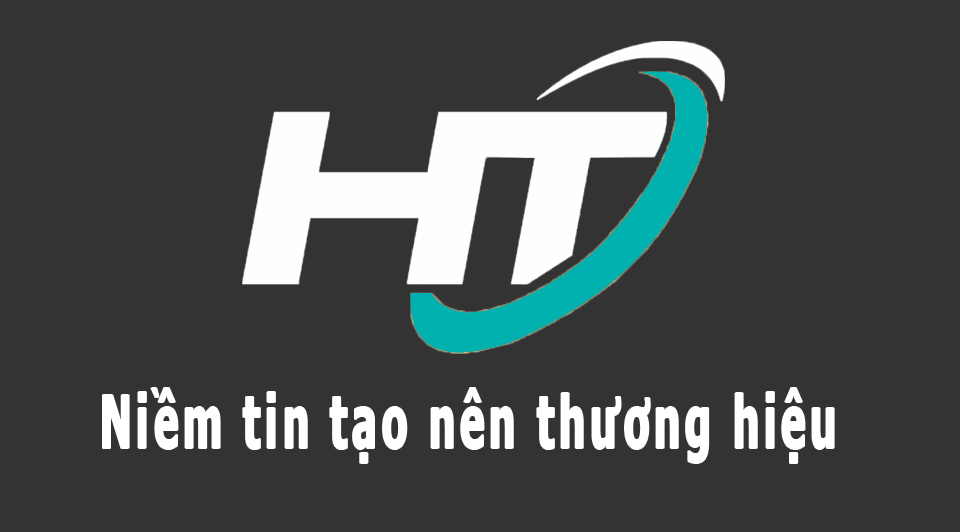
<style>
.page{position:relative;width:960px;height:532px;background:#333333}
.page>*{position:absolute;margin:0}
.t1{font:73.3px "Tahoma-Bold";letter-spacing:0.12em;color:#ffffff;scale:0.56 1}
</style>
<div class="page">
<p class="t1" style="left:103px;top:388px;width:731px;height:75px">Niềm tin tạo nên thương hiệu</p>
</div>
